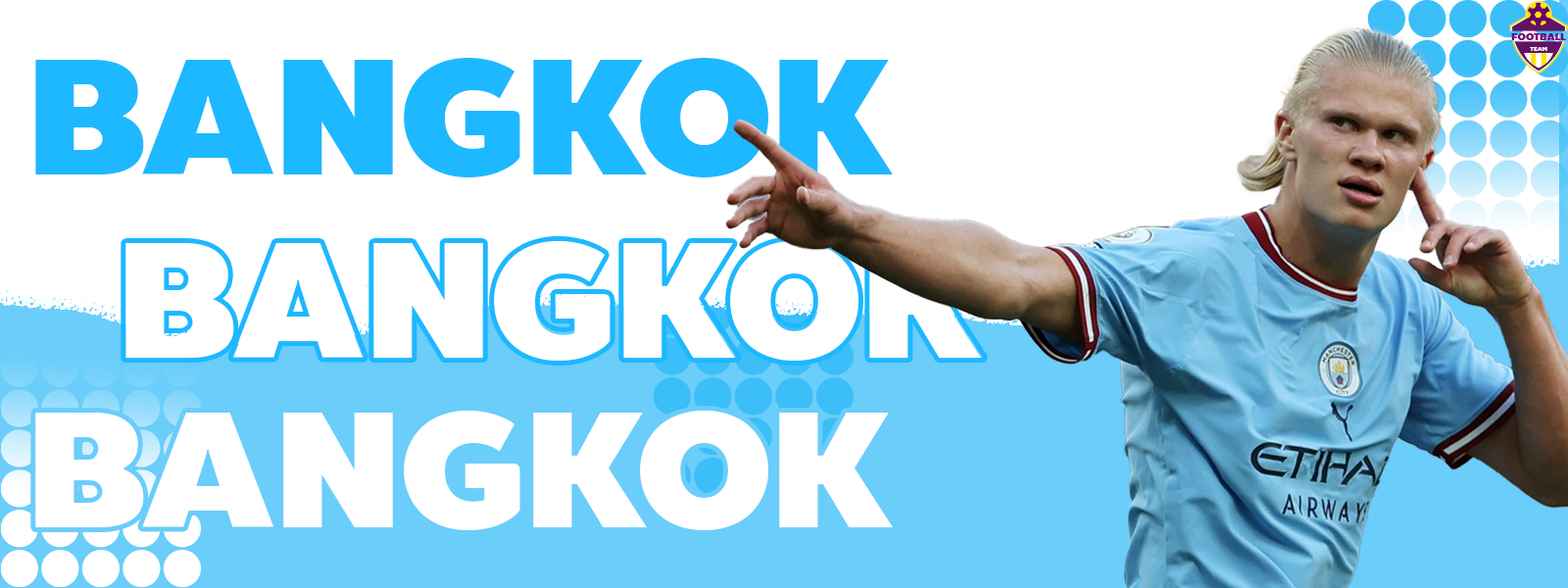
<style>
.page{position:relative;width:1568px;height:588px;background:#ffffff}
.page>*{position:absolute;margin:0}
.t1{font:163.3px "BoonTook-Ultra";color:#1db8ff}
.t2{font:163.3px "BoonTook-Ultra";color:#ffffff}
</style>
<div class="page">
<p class="t1" style="left:35px;top:58px;width:858px;height:119px">BANGKOK</p>
<p class="t2" style="left:125px;top:244px;width:858px;height:120px">BANGKOK</p>
<p class="t2" style="left:125px;top:241px;width:858px;height:120px">BANGKOK</p>
<p class="t2" style="left:35px;top:411px;width:858px;height:119px">BANGKOK</p>
</div>
